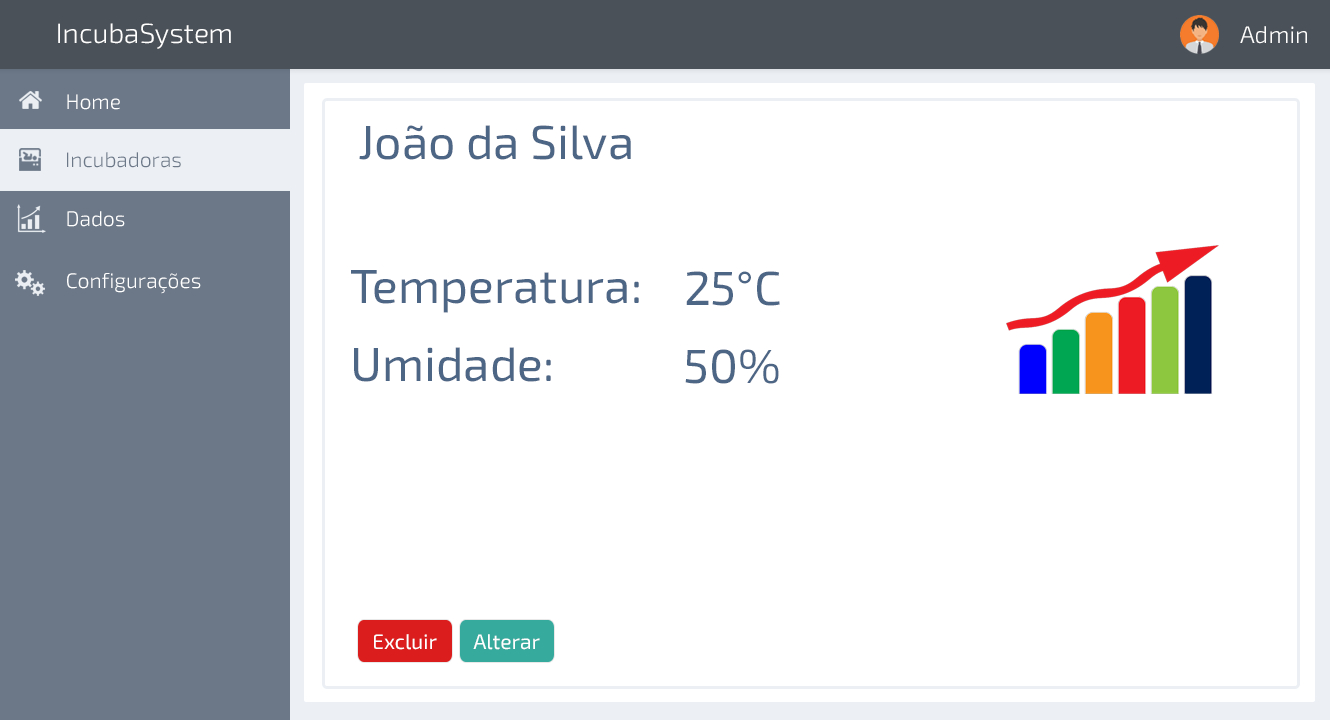
<style>
.page{position:relative;width:1330px;height:720px;background:#ffffff}
.page>*{position:absolute;margin:0}
.t1{font:28px "Exo2-Light";color:#ffffff}
.t2{font:24px "Exo2-Light";color:#ffffff}
.t3{font:21px "Exo2-Light";color:#ffffff}
.t4{font:48px "Exo2-Regular";color:#4e6686}
.t5{font:21px "Exo2-Light";color:#6c7888}
.t6{font:21px "Exo2-Regular";color:#ffffff}
</style>
<div class="page">
<p class="t1" style="left:58px;top:23px;width:173px;height:26px">IncubaSystem</p>
<p class="t2" style="left:1240px;top:26px;width:67px;height:18px">Admin</p>
<p class="t3" style="left:67px;top:94px;width:53px;height:16px">Home</p>
<p class="t4" style="left:359px;top:125px;width:272px;height:35px">João da Silva</p>
<p class="t5" style="left:67px;top:152px;width:114px;height:16px">Incubadoras</p>
<p class="t3" style="left:67px;top:211px;width:58px;height:16px">Dados</p>
<p class="t4" style="left:351px;top:270px;width:288px;height:43px">Temperatura:</p>
<p class="t3" style="left:67px;top:273px;width:134px;height:21px">Configurações</p>
<p class="t4" style="left:686px;top:271px;width:94px;height:35px">25°C</p>
<p class="t4" style="left:354px;top:347px;width:197px;height:35px">Umidade:</p>
<p class="t4" style="left:685px;top:349px;width:94px;height:35px">50%</p>
<p class="t6" style="left:374px;top:634px;width:63px;height:16px">Excluir</p>
<p class="t6" style="left:473px;top:634px;width:67px;height:16px">Alterar</p>
</div>
